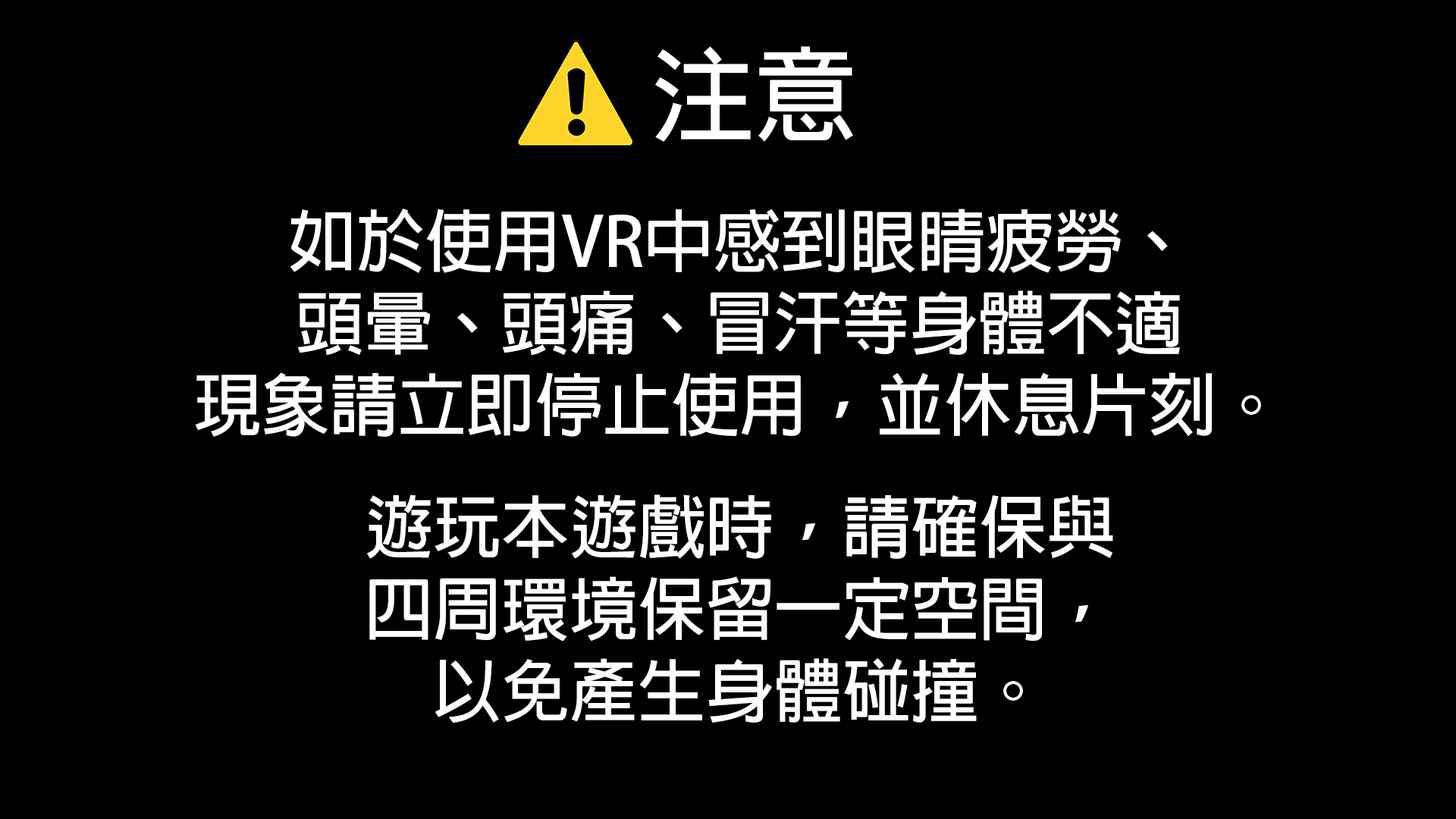
<style>
.page{position:relative;width:1456px;height:819px;background:#000000}
.page>*{position:absolute;margin:0}
.t1{font:102.4px "AdobeFanHeitiStd-Bold";color:#ffffff}
.t2{font:68.2px "AdobeFanHeitiStd-Bold";color:#ffffff}
</style>
<div class="page">
<p class="t1" style="left:655px;top:46px;width:198px;height:96px">注意</p>
<p class="t2" style="left:195px;top:209px;width:1066px;height:228px;text-align:center">如於使用VR中感到眼睛疲勞、<br>頭暈、頭痛、冒汗等身體不適<br>現象請立即停止使用，並休息片刻。</p>
<p class="t2" style="left:367px;top:494px;width:746px;height:229px;text-align:center">遊玩本遊戲時，請確保與<br>四周環境保留一定空間，<br>以免產生身體碰撞。</p>
</div>
